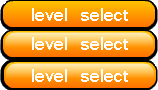
<style>
.page{position:relative;width:158px;height:90px}
.page>*{position:absolute;margin:0}
.t1{font:17.3px "Kartika";color:#ffffff}
</style>
<div class="page">
<p class="t1" style="left:32px;top:8px;width:96px;height:13px">level select</p>
<p class="t1" style="left:32px;top:37px;width:96px;height:13px">level select</p>
<p class="t1" style="left:32px;top:69px;width:96px;height:13px">level select</p>
</div>
